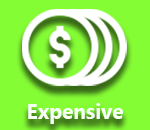
<style>
.page{position:relative;width:150px;height:130px;background:#85fd35}
.page>*{position:absolute;margin:0}
.t1{font:20.8px "SegoeUI-Bold";color:#ffffff}
</style>
<div class="page">
<p class="t1" style="left:28px;top:103px;width:95px;height:21px;opacity:0.93">Expensive</p>
</div>
